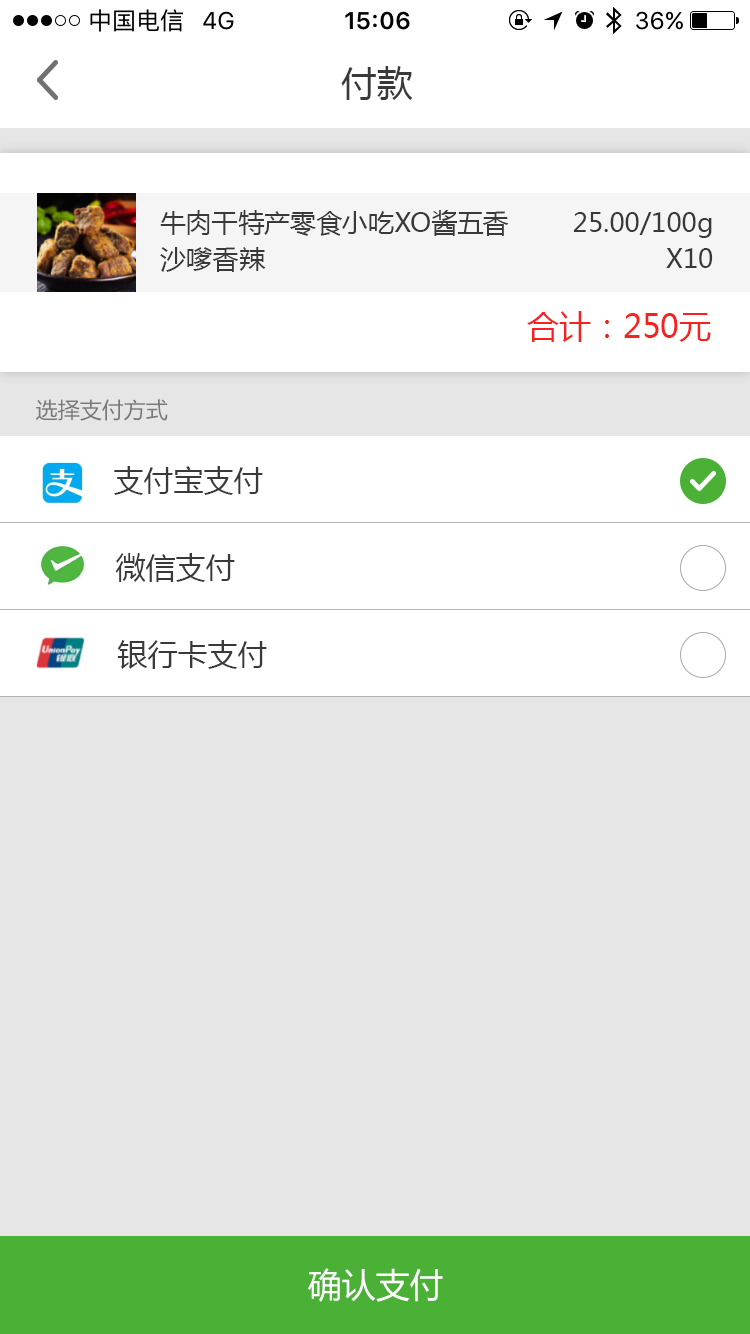
<style>
.page{position:relative;width:750px;height:1334px;background:#e6e6e6}
.page>*{position:absolute;margin:0}
.t1{font:36px "MicrosoftYaHei";color:#393939}
.t2{font:26px/35.7px "MicrosoftYaHei";color:#393939}
.t3{font:32px "MicrosoftYaHei";color:#f82121}
.t4{font:22px "MicrosoftYaHei";color:#797979}
.t5{font:30px "MicrosoftYaHei";color:#393939}
.t6{font:34px "MicrosoftYaHei";color:#ffffff}
</style>
<div class="page">
<p class="t1" style="left:341px;top:66px;width:72px;height:34px">付款</p>
<p class="t2" style="left:160px;top:210px;width:349px;height:62px">牛肉干特产零食小吃XO酱五香<br>沙嗲香辣</p>
<p class="t2" style="left:573px;top:212px;width:140px;height:56px;text-align:right">25.00/100g<br>            X10</p>
<p class="t3" style="left:527px;top:311px;width:184px;height:31px">合计：250元</p>
<p class="t4" style="left:36px;top:399px;width:132px;height:22px">选择支付方式</p>
<p class="t5" style="left:114px;top:466px;width:149px;height:29px">支付宝支付</p>
<p class="t5" style="left:115px;top:553px;width:120px;height:29px">微信支付</p>
<p class="t5" style="left:117px;top:640px;width:150px;height:29px">银行卡支付</p>
<p class="t6" style="left:308px;top:1268px;width:135px;height:34px">确认支付</p>
</div>
